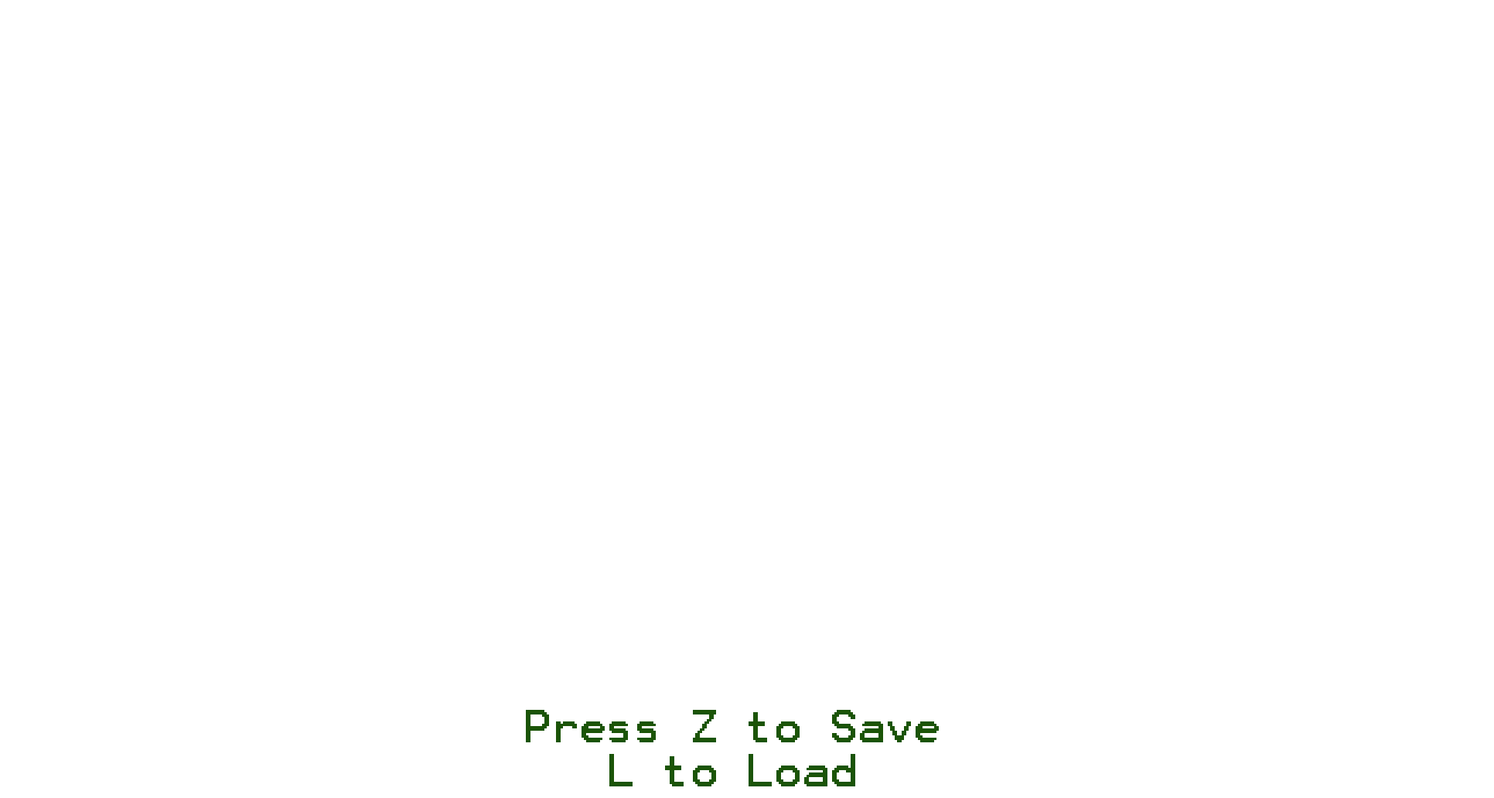
<style>
.page{position:relative;width:1494px;height:798px;background:#ffffff}
.page>*{position:absolute;margin:0}
.t1{font:37.1px "Terminal";color:#1b5407}
</style>
<div class="page">
<p class="t1" style="left:526px;top:710px;width:413px;height:76px;text-align:center">Press Z to Save<br>L to Load</p>
</div>
